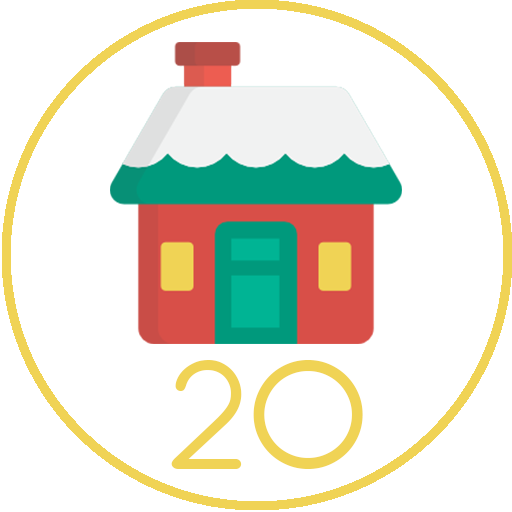
<style>
.page{position:relative;width:512px;height:512px;background:#ffffff}
.page>*{position:absolute;margin:0}
.t1{font:170.7px "Antipasto";color:#f0d355}
</style>
<div class="page">
<p class="t1" style="left:171px;top:360px;width:192px;height:109px">20</p>
</div>
